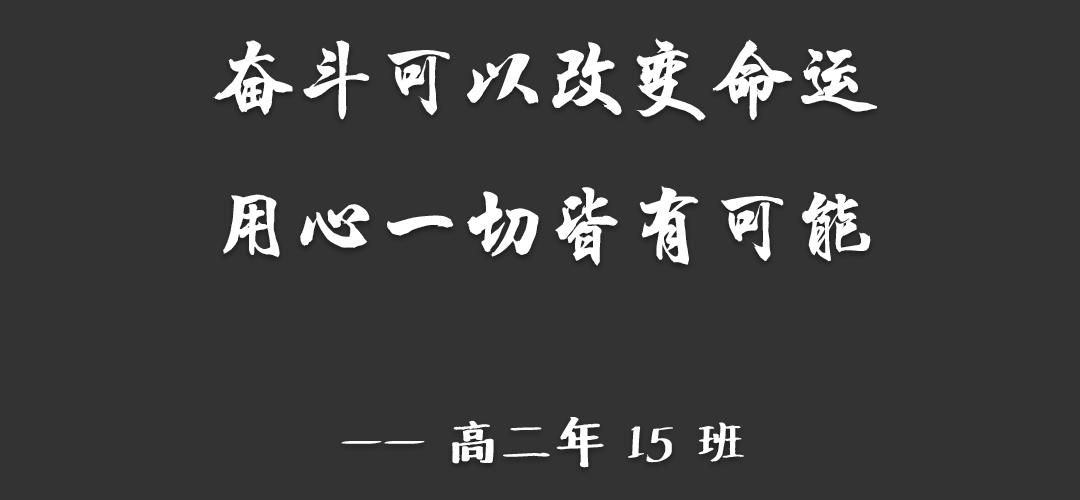
<style>
.page{position:relative;width:1080px;height:500px;background:#333333}
.page>*{position:absolute;margin:0}
.t1{font:83.3px "HYChengXingJ";color:#ffffff}
.t2{font:50px "Undefined";color:#ffffff}
</style>
<div class="page">
<p class="t1" style="left:212px;top:38px;width:665px;height:430px;text-align:center">奋斗可以改变命运<br>用心一切皆有可能<br><span class="t2"><br>—— 高二年 15 班</span></p>
</div>
